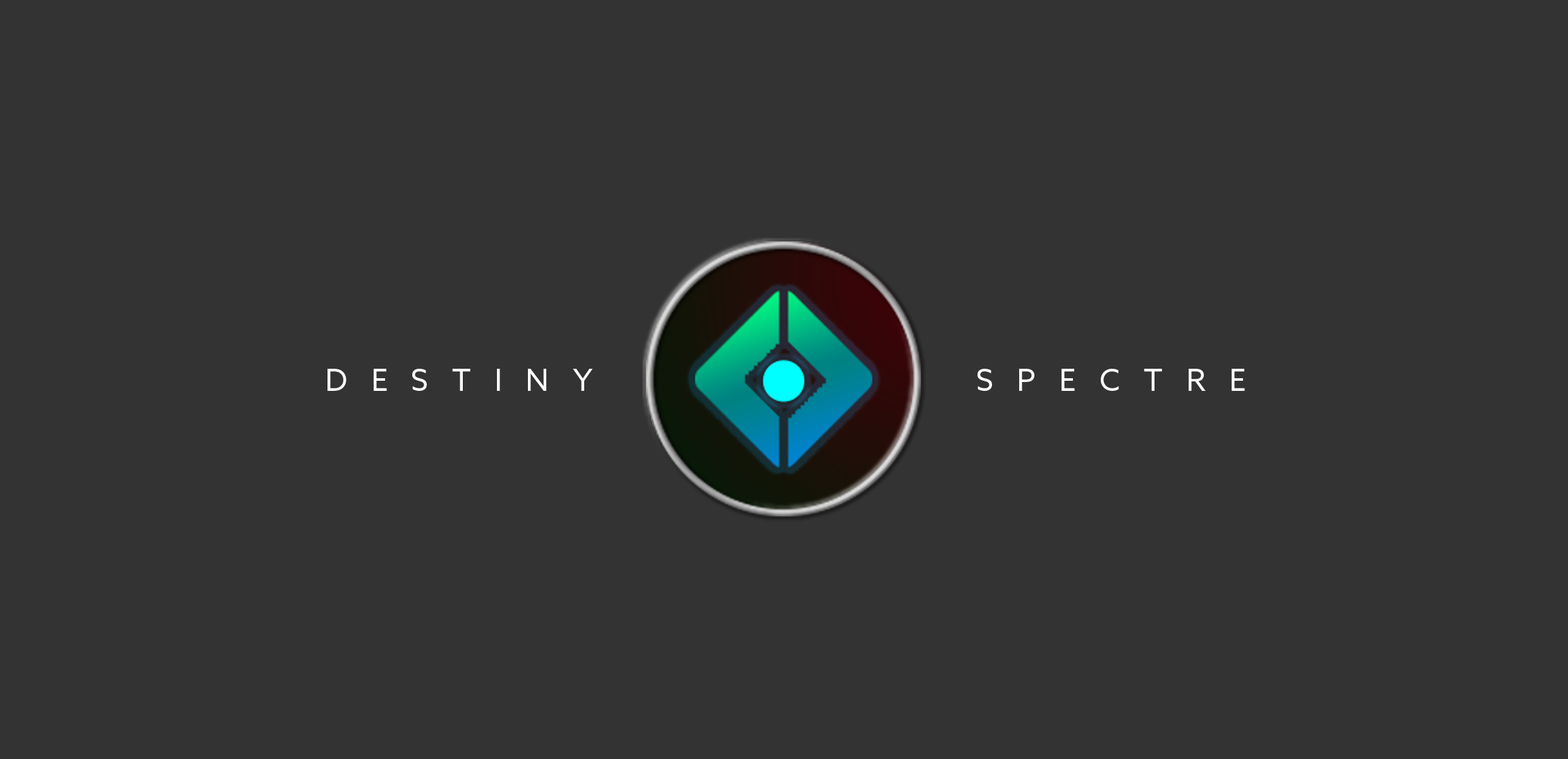
<style>
.page{position:relative;width:1568px;height:759px;background:#333333}
.page>*{position:absolute;margin:0}
.t1{font:30.3px "AzoSans-Regular";letter-spacing:0.777em;color:#ffffff}
</style>
<div class="page">
<p class="t1" style="left:328px;top:369px;width:265px;height:22px">DESTINY</p>
<p class="t1" style="left:977px;top:369px;width:268px;height:22px">SPECTRE</p>
</div>
